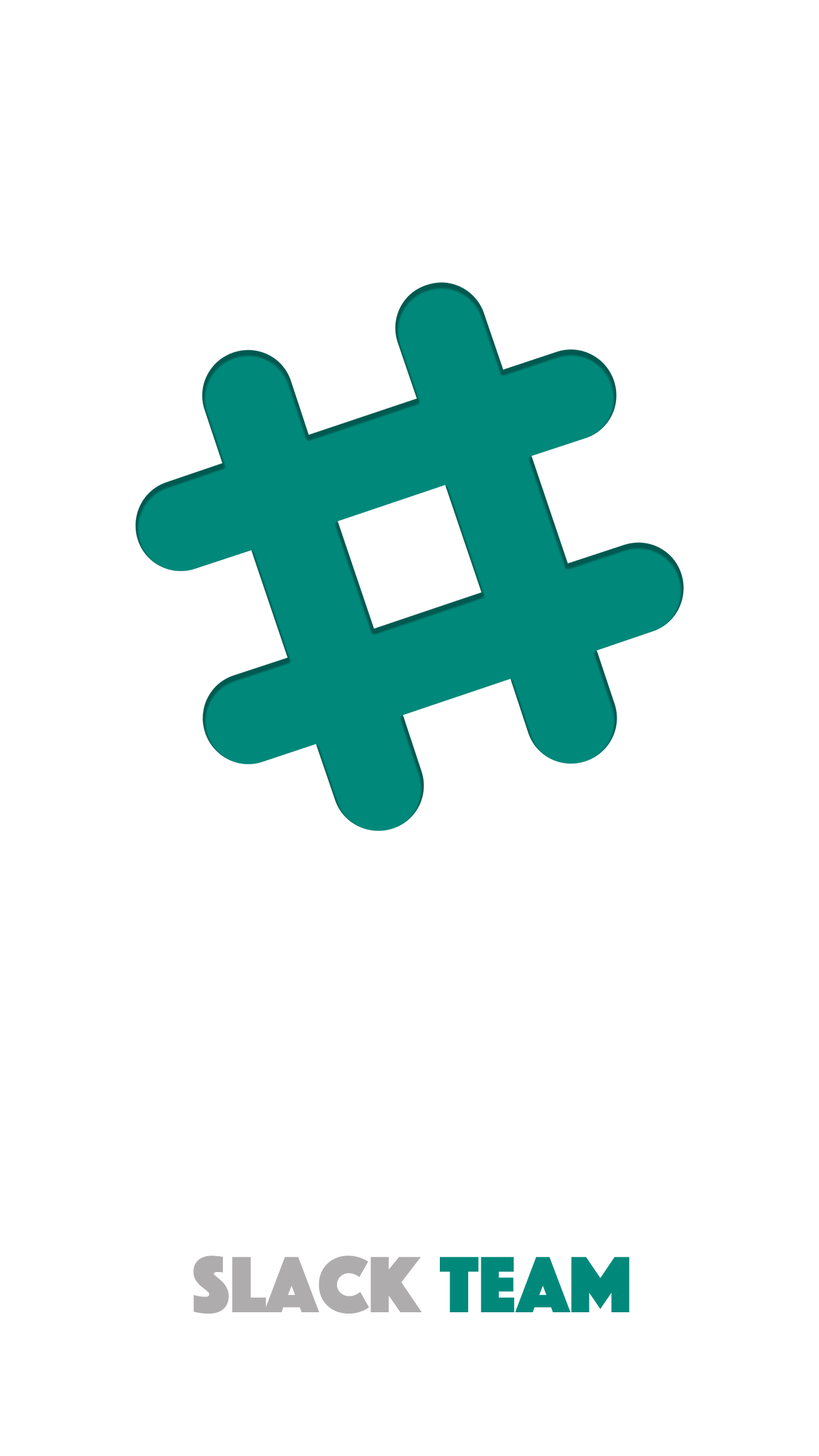
<style>
.page{position:relative;width:819px;height:1456px;background:#ffffff}
.page>*{position:absolute;margin:0}
.t1{font:82.4px "Phosphate-Solid";color:#aeacac}
.t2{font:82.4px "Phosphate-Solid";color:#00897b}
</style>
<div class="page">
<p class="t1" style="left:193px;top:1256px;width:229px;height:58px">Slack</p>
<p class="t2" style="left:440px;top:1257px;width:190px;height:55px">TEAM</p>
</div>
